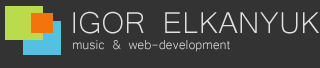
<style>
.page{position:relative;width:320px;height:68px;background:#333333}
.page>*{position:absolute;margin:0}
.t1{font:38.9px "Microsoft-Yi-Baiti";color:#e1e0e0}
.t2{font:16.7px "Microsoft-Yi-Baiti";color:#e1e0e0}
</style>
<div class="page">
<p class="t1" style="left:73px;top:11px;width:246px;height:23px">IGOR ELKANYUK</p>
<p class="t2" style="left:73px;top:40px;width:157px;height:12px">music &amp; web-development</p>
</div>
